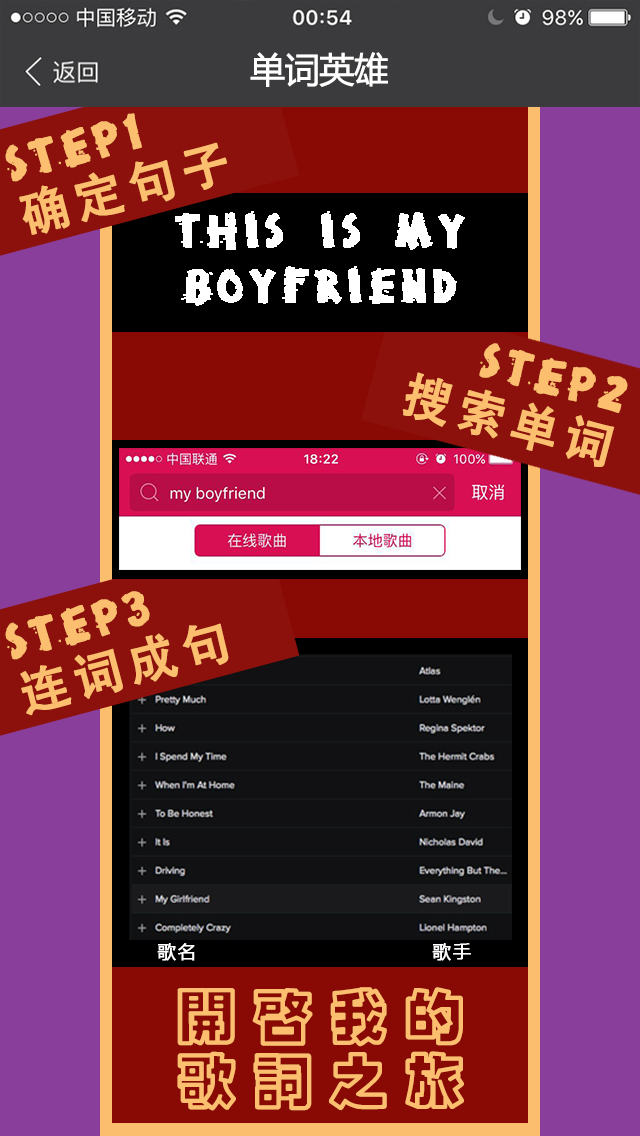
<style>
.page{position:relative;width:640px;height:1136px;background:#893e9b}
.page>*{position:absolute;margin:0}
.t1{font:35px "MicrosoftYaHei";letter-spacing:-0.04em;color:#ffffff;font-weight:bold}
.t2{font:49.2px/52.8px "BrokenStick";letter-spacing:0.1em;color:#fcbe6f;font-weight:bold}
.t3{font:49.2px/52.8px "AdobeHeitiStd-Regular";letter-spacing:0.1em;color:#fcbe6f;font-weight:bold}
.t4{font:48px/55px "BrokenStick";letter-spacing:0.1em;color:#ffffff;font-weight:bold}
.t5{font:18px "MicrosoftYaHei";letter-spacing:0.1em;color:#ffffff;font-weight:bold}
.t6{font:60px/64.3px "¾­µä¿ÕµþºÚ Regular";letter-spacing:0.24em;color:#fcbe6f;font-weight:bold}
</style>
<div class="page">
<p class="t1" style="left:250px;top:52px;width:138px;height:35px">单词英雄</p>
<p class="t2" style="left:5px;top:113px;width:222px;height:122px;rotate:-15deg">STEP1<br><span class="t3">确定句子</span></p>
<p class="t4" style="left:175px;top:211px;width:290px;height:95px;text-align:center">THIS IS MY <br>BOYFRIEND</p>
<p class="t2" style="left:402px;top:343px;width:226px;height:124px;text-align:right;rotate:15deg">STEP2<br><span class="t3">搜索单词</span></p>
<p class="t2" style="left:5px;top:591px;width:224px;height:125px;rotate:-15deg">STEP3<br><span class="t3">连词成句</span></p>
<p class="t5" style="left:157px;top:943px;width:38px;height:18px">歌名</p>
<p class="t5" style="left:432px;top:943px;width:39px;height:18px">歌手</p>
<p class="t6" style="left:177px;top:987px;width:287px;height:124px;text-align:center">开启我的<br>歌词之旅</p>
</div>
